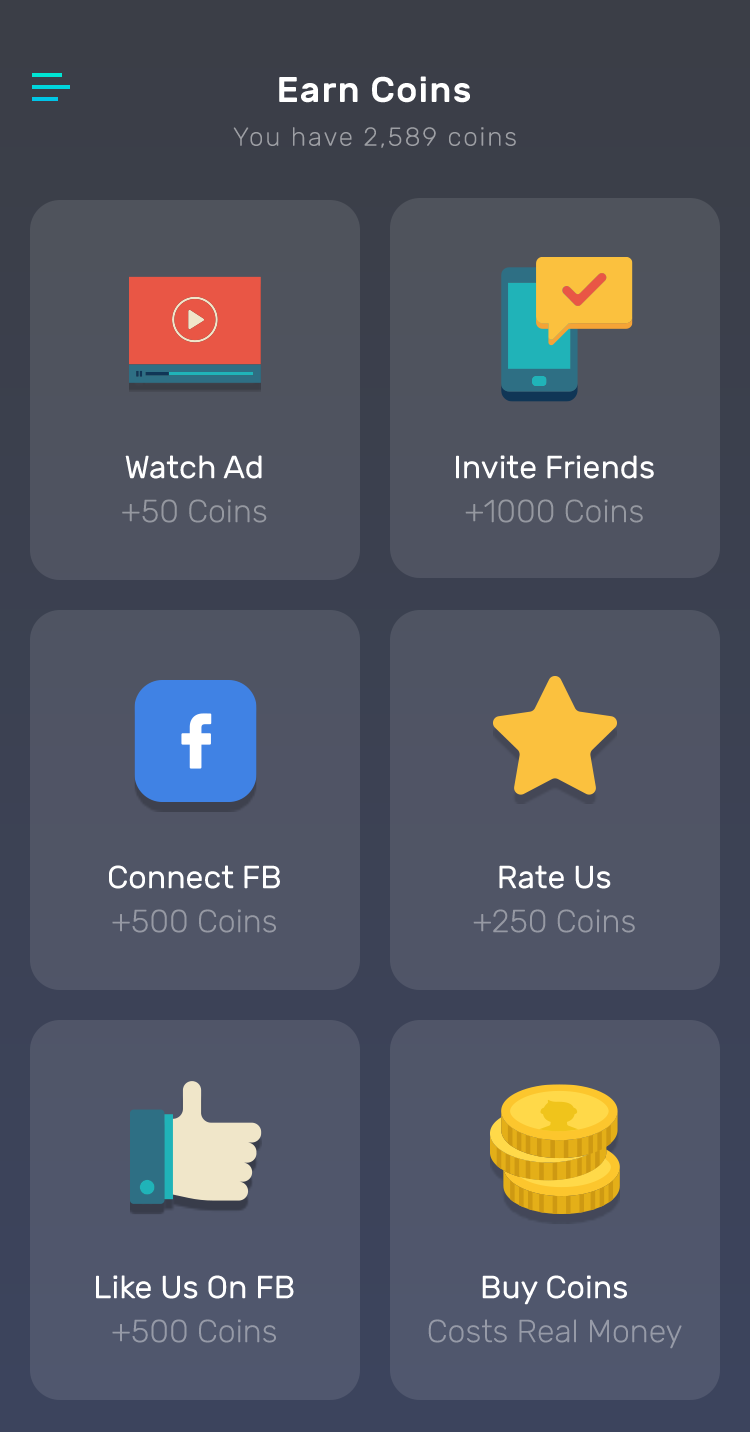
<style>
.page{position:relative;width:750px;height:1432px}
.page>*{position:absolute;margin:0}
.t1{font:36px "Rubik-Medium";letter-spacing:0.03em;color:#ffffff}
.t2{font:26px "Rubik-Light";letter-spacing:0.07em;color:#9d9fa4}
.t3{font:32px "Rubik-Regular";color:#ffffff}
.t4{font:32px "Rubik-Light";color:#9598a0}
.t5{font:32px "Rubik-Light";color:#9699a4}
.t6{font:32px "Rubik-Light";color:#969aa7}
</style>
<div class="page">
<p class="t1" style="left:279px;top:76px;width:191px;height:27px">Earn Coins</p>
<p class="t2" style="left:233px;top:127px;width:283px;height:21px">You have 2,589 coins</p>
<p class="t3" style="left:125px;top:455px;width:137px;height:24px">Watch Ad</p>
<p class="t3" style="left:456px;top:455px;width:198px;height:24px">Invite Friends</p>
<p class="t4" style="left:122px;top:499px;width:145px;height:24px">+50 Coins</p>
<p class="t4" style="left:465px;top:499px;width:178px;height:24px">+1000 Coins</p>
<p class="t3" style="left:109px;top:865px;width:171px;height:24px">Connect FB</p>
<p class="t3" style="left:499px;top:865px;width:112px;height:24px">Rate Us</p>
<p class="t5" style="left:112px;top:909px;width:164px;height:24px">+500 Coins</p>
<p class="t5" style="left:473px;top:909px;width:162px;height:24px">+250 Coins</p>
<p class="t3" style="left:96px;top:1275px;width:198px;height:24px">Like Us On FB</p>
<p class="t3" style="left:482px;top:1275px;width:145px;height:30px">Buy Coins</p>
<p class="t6" style="left:112px;top:1319px;width:164px;height:24px">+500 Coins</p>
<p class="t6" style="left:428px;top:1319px;width:254px;height:30px">Costs Real Money</p>
</div>
